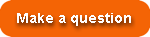
<style>
.page{position:relative;width:150px;height:37px;background:#f46405}
.page>*{position:absolute;margin:0}
.t1{font:14px "Arial-BoldMT";color:#ffffff}
</style>
<div class="page">
<p class="t1" style="left:17px;top:13px;width:114px;height:13px">Make a question</p>
</div>
